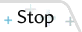
<style>
.page{position:relative;width:82px;height:32px;background:#ffffff}
.page>*{position:absolute;margin:0}
.t1{font:18.7px "Amira-Roman";color:#000000}
</style>
<div class="page">
<p class="t1" style="left:17px;top:10px;width:37px;height:18px;opacity:0.96">Stop</p>
</div>
